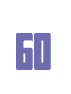
<style>
.page{position:relative;width:71px;height:94px;background:#ffffff}
.page>*{position:absolute;margin:0}
.t1{font:50px "Far-Out!";color:#6d6cb0}
</style>
<div class="page">
<p class="t1" style="left:16px;top:33px;width:35px;height:37px">60</p>
</div>
